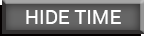
<style>
.page{position:relative;width:144px;height:36px}
.page>*{position:absolute;margin:0}
.t1{font:20px "Roboto-Regular";color:#ffffff}
</style>
<div class="page">
<p class="t1" style="left:26px;top:10px;width:95px;height:14px">HIDE TIME</p>
</div>
